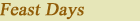
<style>
.page{position:relative;width:140px;height:21px;background:#e6e6b8}
.page>*{position:absolute;margin:0}
.t1{font:18px "TimesNewRomanPSMT";color:#915c07;font-weight:bold;font-style:italic}
</style>
<div class="page">
<p class="t1" style="left:0px;top:3px;width:84px;height:17px">Feast Days</p>
</div>
